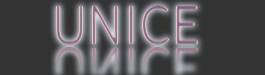
<style>
.page{position:relative;width:265px;height:75px;background:#333333}
.page>*{position:absolute;margin:0}
.t1{font:51.4px "SourceHanSansCN-Normal"}
</style>
<div class="page">
<p class="t1" style="left:56px;top:5px;width:142px;height:40px">UNICE</p>
</div>
